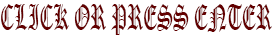
<style>
.page{position:relative;width:272px;height:38px;background:#ffffff}
.page>*{position:absolute;margin:0}
.t1{font:35.2px "OldEnglishTextMT";color:#630000;scale:0.54 1}
</style>
<div class="page">
<p class="t1" style="left:1px;top:4px;width:271px;height:31px">CLICK OR PRESS ENTER</p>
</div>
